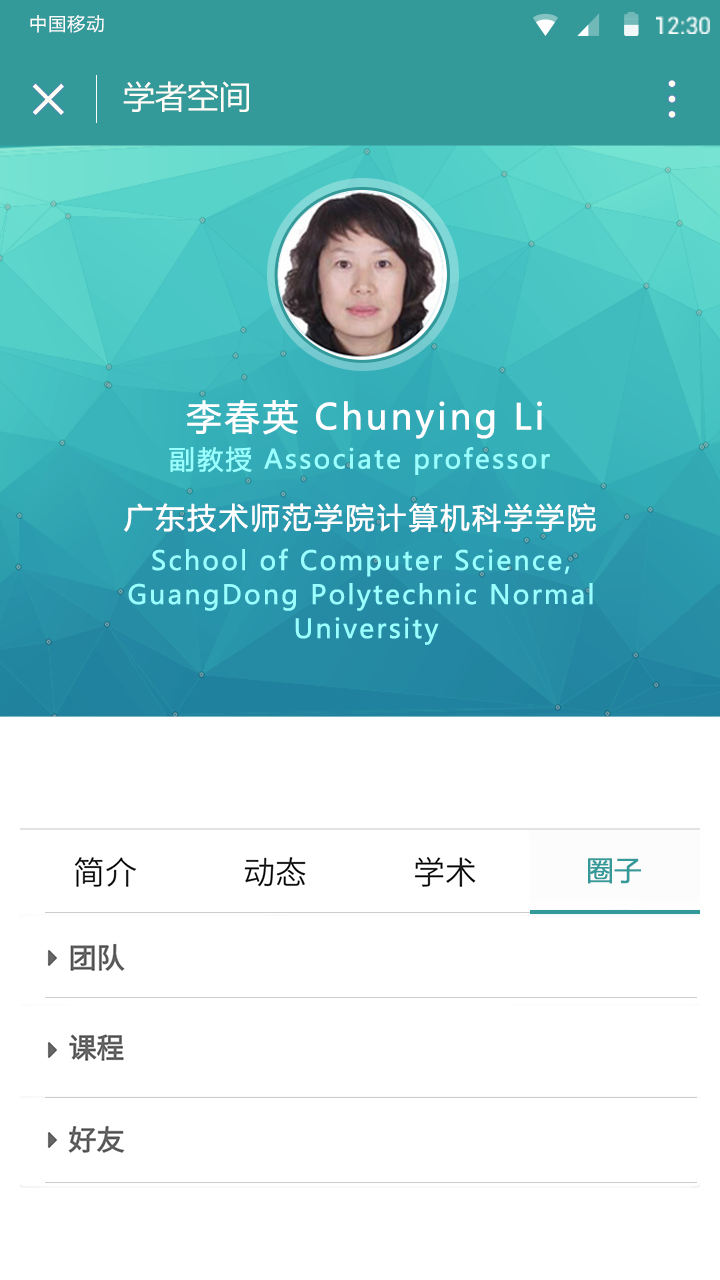
<style>
.page{position:relative;width:720px;height:1280px;background:#ffffff}
.page>*{position:absolute;margin:0}
.t1{font:17.9px "MicrosoftYaHei";letter-spacing:0.065em;color:#ffffff}
.t2{font:32px "MicrosoftYaHei";color:#fefdf8}
.t3{font:35px "MicrosoftYaHei";letter-spacing:0.065em;color:#ffffff;font-weight:bold}
.t4{font:26px "MicrosoftYaHei";letter-spacing:0.065em;color:#99ffff;font-weight:bold}
.t5{font:29px "MicrosoftYaHei";letter-spacing:0.065em;color:#ffffff;font-weight:bold}
.t6{font:26px/34px "MicrosoftYaHei";letter-spacing:0.065em;color:#99ffff;font-weight:bold}
.t7{font:27px "MicrosoftYaHei";color:#339999;font-weight:bold}
</style>
<div class="page">
<p class="t1" style="left:30px;top:15px;width:74px;height:18px">中国移动</p>
<p class="t2" style="left:123px;top:81px;width:126px;height:31px">学者空间</p>
<p class="t3" style="left:186px;top:400px;width:356px;height:39px">李春英 Chunying Li</p>
<p class="t4" style="left:169px;top:446px;width:381px;height:29px">副教授 Associate professor</p>
<p class="t5" style="left:124px;top:503px;width:472px;height:30px">广东技术师范学院计算机科学学院</p>
<p class="t6" style="left:128px;top:548px;width:465px;height:97px;text-align:center">School of Computer Science,<br>GuangDong Polytechnic Normal<br> University</p>
<p class="t7" style="left:588px;top:858px;width:53px;height:26px">圈子</p>
</div>
